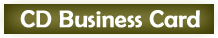
<style>
.page{position:relative;width:218px;height:38px}
.page>*{position:absolute;margin:0}
.t1{font:24px "BerlinSansFB-Reg";color:#ffffff;font-weight:bold}
</style>
<div class="page">
<p class="t1" style="left:20px;top:10px;width:180px;height:18px">CD Business Card</p>
</div>
